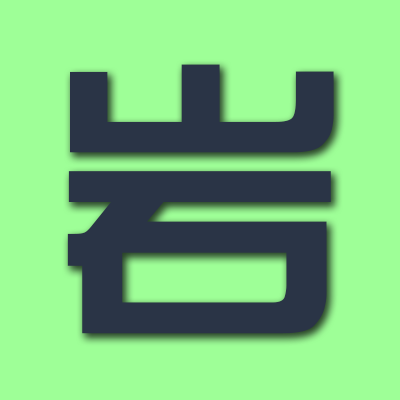
<style>
.page{position:relative;width:400px;height:400px;background:#9eff97}
.page>*{position:absolute;margin:0}
.t1{font:300px "HYk1gj";color:#2a3446}
</style>
<div class="page">
<p class="t1" style="left:67px;top:64px;width:267px;height:270px">岩</p>
</div>
